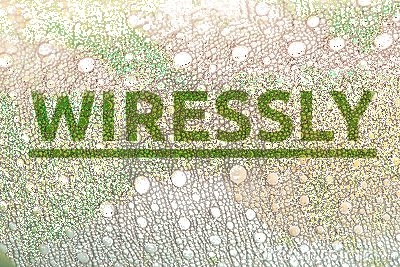
<style>
.page{position:relative;width:400px;height:267px;background:#ffffff}
.page>*{position:absolute;margin:0}
.t1{font:72px "Ubuntu-Bold";text-decoration:underline}
</style>
<div class="page">
<p class="t1" style="left:29px;top:90px;width:348px;height:68px">WIRESSLY</p>
</div>
